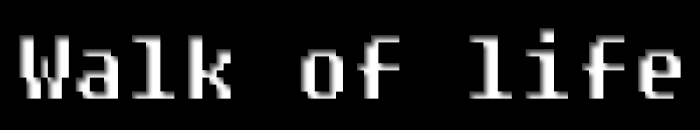
<style>
.page{position:relative;width:700px;height:130px;background:#000000}
.page>*{position:absolute;margin:0}
.t1{font:90px "Fixedsys"}
</style>
<div class="page">
<p class="t1" style="left:19px;top:28px;width:662px;height:71px">Walk of life</p>
</div>
